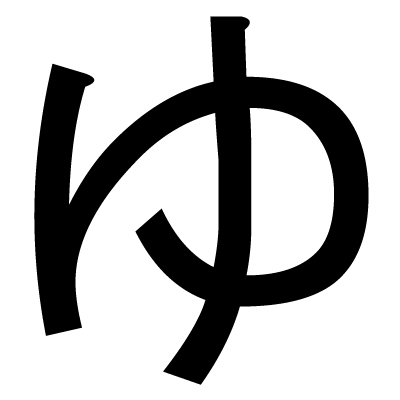
<style>
.page{position:relative;width:400px;height:400px;background:#ffffff}
.page>*{position:absolute;margin:0}
.t1{font:416.7px "MS-PGothic";color:#000000}
</style>
<div class="page">
<p class="t1" style="left:34px;top:16px;width:335px;height:369px">ゆ</p>
</div>
